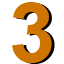
<style>
.page{position:relative;width:64px;height:64px;background:#ffffff}
.page>*{position:absolute;margin:0}
.t1{font:83.3px "Arial-BoldMT";color:#ce7400}
</style>
<div class="page">
<p class="t1" style="left:12px;top:2px;width:40px;height:61px">3</p>
</div>
